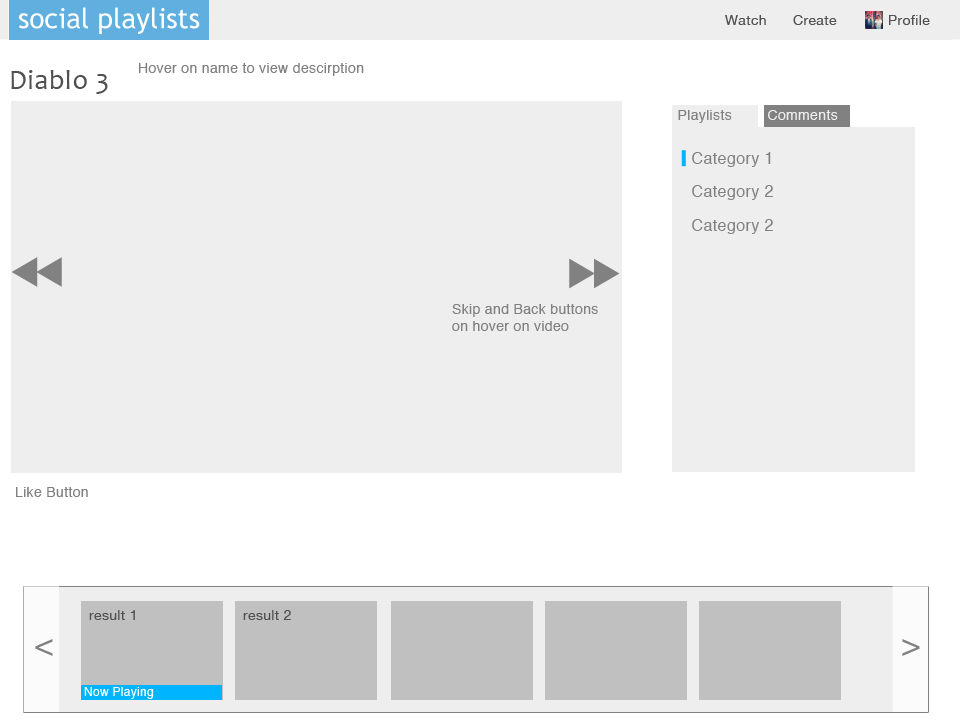
<style>
.page{position:relative;width:960px;height:720px;background:#eeeeee}
.page>*{position:absolute;margin:0}
.t1{font:14px "HelveticaNeue";letter-spacing:0.025em;color:#515151}
.t2{font:14px "Helvetica";letter-spacing:0.025em;color:#818181}
.t3{font:28px "Candara";letter-spacing:0.025em;color:#515151}
.t4{font:14px "Helvetica";letter-spacing:0.025em;color:#eeeeee}
.t5{font:16px "Helvetica";letter-spacing:0.025em;color:#818181}
.t6{font:30px "Helvetica";letter-spacing:0.025em;color:#818181}
.t7{font:12px "Helvetica";letter-spacing:0.025em;color:#ffffff}
</style>
<div class="page">
<p class="t1" style="left:725px;top:15px;width:41px;height:10px">Watch</p>
<p class="t1" style="left:793px;top:15px;width:44px;height:10px">Create</p>
<p class="t1" style="left:889px;top:15px;width:41px;height:10px">Profile</p>
<p class="t2" style="left:139px;top:63px;width:225px;height:13px">Hover on name to view descirption</p>
<p class="t3" style="left:11px;top:70px;width:97px;height:24px">Diablo 3</p>
<p class="t2" style="left:678px;top:110px;width:54px;height:13px">Playlists</p>
<p class="t4" style="left:768px;top:110px;width:70px;height:10px">Comments</p>
<p class="t5" style="left:692px;top:152px;width:79px;height:15px">Category 1</p>
<p class="t5" style="left:692px;top:185px;width:81px;height:15px">Category 2</p>
<p class="t5" style="left:692px;top:219px;width:81px;height:15px">Category 2</p>
<p class="t2" style="left:452px;top:304px;width:146px;height:27px">Skip and Back buttons <br>on hover on video</p>
<p class="t2" style="left:16px;top:487px;width:72px;height:10px">Like Button</p>
<p class="t1" style="left:89px;top:610px;width:46px;height:10px">result 1</p>
<p class="t1" style="left:243px;top:610px;width:48px;height:10px">result 2</p>
<p class="t6" style="left:35px;top:639px;width:18px;height:17px">&lt;</p>
<p class="t6" style="left:902px;top:639px;width:18px;height:17px">&gt;</p>
<p class="t7" style="left:84px;top:687px;width:70px;height:12px">Now Playing</p>
</div>
